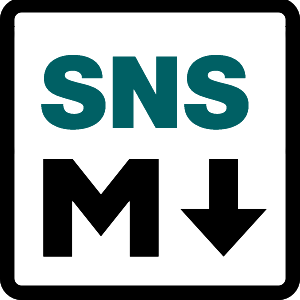
<style>
.page{position:relative;width:300px;height:300px;background:#ffffff}
.page>*{position:absolute;margin:0}
.t1{font:100px "Helvetica95-Black";color:#006064}
</style>
<div class="page">
<p class="t1" style="left:41px;top:55px;width:208px;height:75px">SNS</p>
</div>
